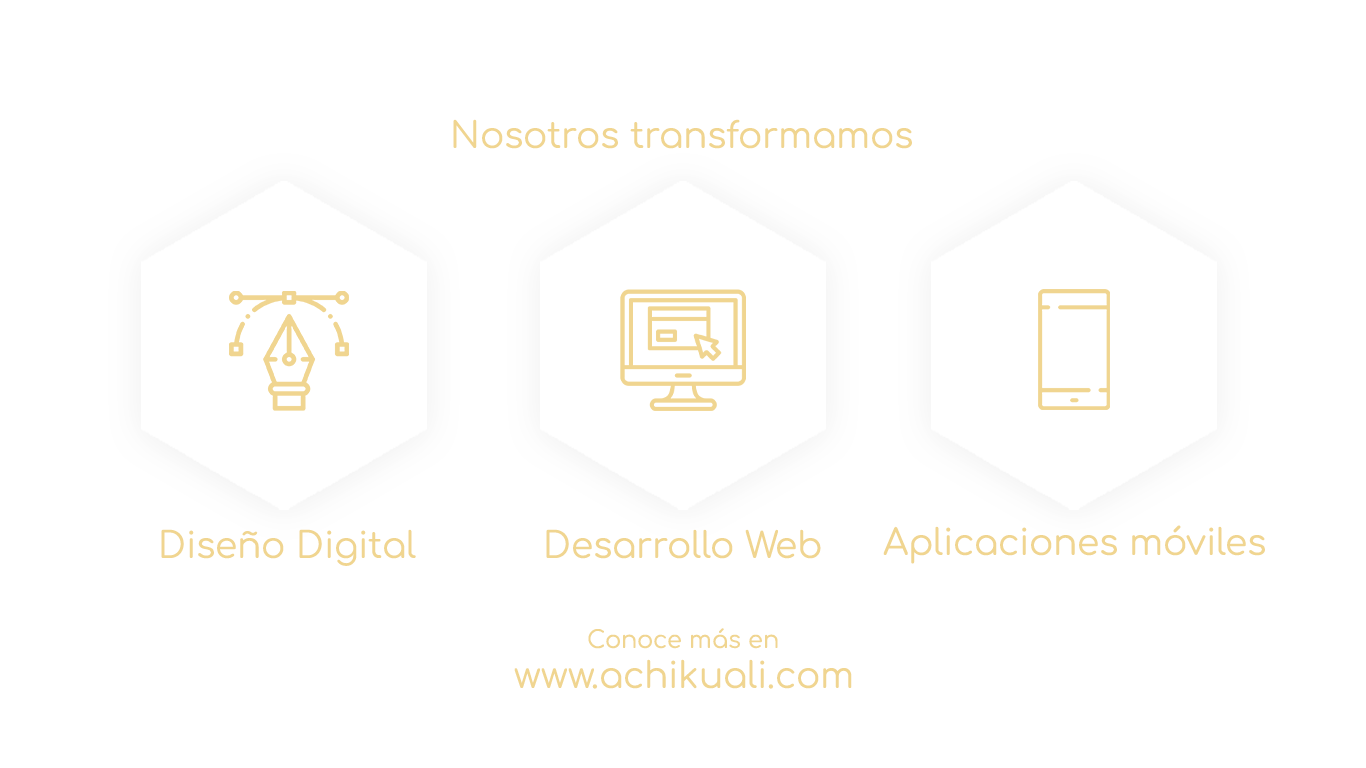
<style>
.page{position:relative;width:1366px;height:768px;background:#ffffff}
.page>*{position:absolute;margin:0}
.t1{font:36px "Comfortaa-Regular";color:#f0d590}
.t2{font:24px "Comfortaa-Regular";color:#f0d590}
</style>
<div class="page">
<p class="t1" style="left:453px;top:119px;width:459px;height:30px">Nosotros transformamos</p>
<p class="t1" style="left:161px;top:529px;width:255px;height:37px">Diseño Digital</p>
<p class="t1" style="left:546px;top:529px;width:275px;height:30px">Desarrollo Web</p>
<p class="t1" style="left:883px;top:525px;width:382px;height:39px">Aplicaciones móviles</p>
<p class="t2" style="left:588px;top:628px;width:190px;height:21px">Conoce más en</p>
<p class="t1" style="left:514px;top:659px;width:338px;height:30px">www.achikuali.com</p>
</div>
